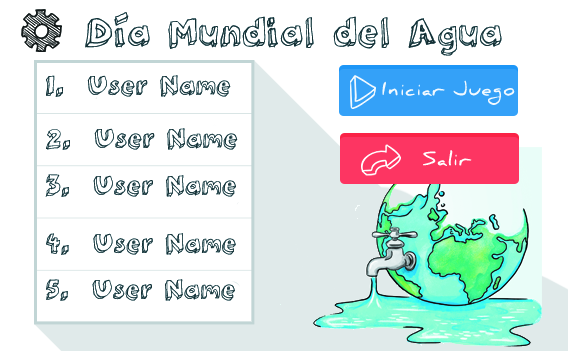
<style>
.page{position:relative;width:568px;height:351px;background:#ffffff}
.page>*{position:absolute;margin:0}
.t1{font:24.3px "3dumb";letter-spacing:0.05em;color:#142f34}
.t2{font:18.5px "Daniel-Bold";letter-spacing:0.05em;color:#ffffff}
</style>
<div class="page">
<p class="t1" style="left:46px;top:75px;width:185px;height:22px">1.  User Name</p>
<p class="t1" style="left:46px;top:128px;width:192px;height:22px">2.  User Name</p>
<p class="t2" style="left:423px;top:150px;width:49px;height:16px">Salir</p>
<p class="t1" style="left:45px;top:174px;width:191px;height:23px">3.  User Name</p>
<p class="t1" style="left:46px;top:233px;width:190px;height:22px">4.  User Name</p>
<p class="t1" style="left:46px;top:279px;width:189px;height:22px">5.  User Name</p>
</div>
